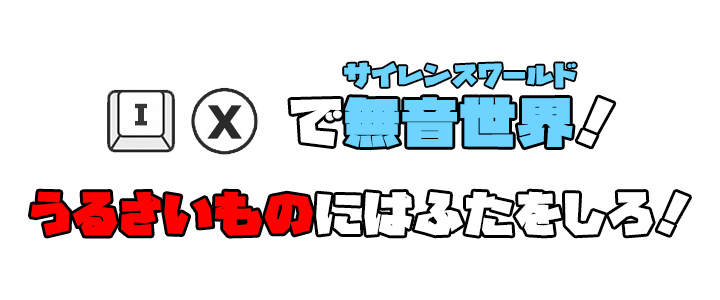
<style>
.page{position:relative;width:720px;height:300px;background:#ffffff}
.page>*{position:absolute;margin:0}
.t1{font:25px "GN-KMBFont-UB-OldstyleKana";letter-spacing:0.05em;color:#6ed4ff;scale:1.1 1}
.t2{font:50px "GN-KMBFont-UB-OldstyleKana";letter-spacing:0.05em;color:#6ed4ff;scale:1.1 1}
.t3{font:50px "GN-KMBFont-UB-OldstyleKana";letter-spacing:0.05em;color:#ffffff;scale:1.1 1}
.t4{font:26px "WanpakuRuika-08";letter-spacing:0.05em;color:#363636;font-weight:bold;scale:1.1 1}
.t5{font:40px "WanpakuRuika-08";letter-spacing:0.05em;color:#2a2a2a;font-weight:bold;scale:1.1 1}
.t6{font:44px "GN-KMBFont-UB-OldstyleKana";letter-spacing:0.05em;color:#ffffff;scale:1.1 1}
.t7{font:44px "GN-KMBFont-UB-OldstyleKana";letter-spacing:0.05em;color:#ff0000;scale:1.1 1}
</style>
<div class="page">
<p class="t1" style="left:344px;top:62px;width:232px;height:26px">サイレンスワールド</p>
<p class="t2" style="left:290px;top:97px;width:324px;height:51px"><span class="t3">で</span>無音世界<span class="t3">！</span></p>
<p class="t4" style="left:135px;top:103px;width:12px;height:23px">I</p>
<p class="t5" style="left:207px;top:105px;width:35px;height:34px">X</p>
<p class="t6" style="left:31px;top:191px;width:658px;height:45px"><span class="t7">うるさいもの</span>にはふたをしろ！</p>
</div>
